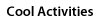
<style>
.page{position:relative;width:100px;height:23px;background:#ffffff}
.page>*{position:absolute;margin:0}
.t1{font:14px "MyriadPro-Semibold";color:#000000}
</style>
<div class="page">
<p class="t1" style="left:7px;top:6px;width:86px;height:10px">Cool Activities</p>
</div>
